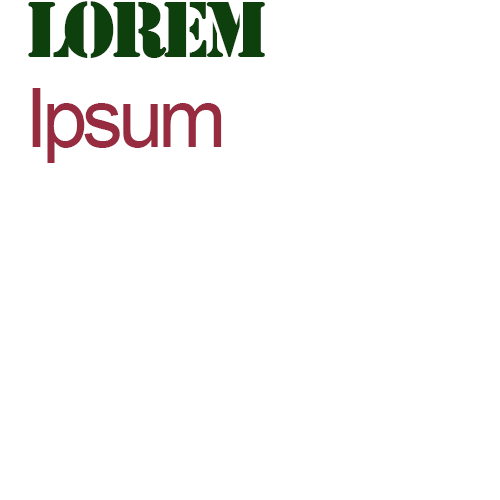
<style>
.page{position:relative;width:500px;height:500px;background:#ffffff}
.page>*{position:absolute;margin:0}
.t1{font:82px/90px "Stencil";letter-spacing:-0.068em;color:#0e400d}
.t2{font:82px/90px "ArialMT";letter-spacing:-0.068em;color:#972b40}
</style>
<div class="page">
<p class="t1" style="left:28px;top:1px;width:237px;height:162px">Lorem <br><span class="t2">Ipsum</span></p>
</div>
